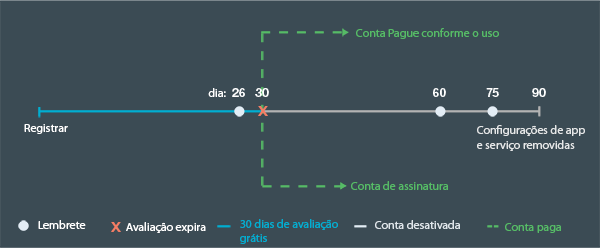
<style>
.page{position:relative;width:600px;height:248px;background:#3b4b54}
.page>*{position:absolute;margin:0}
.t1{font:11.9px "MyriadPro-Regular";color:#56bb66}
.t2{font:11.9px "MyriadPro-Regular";color:#ffffff}
.t3{font:11.9px "HelvNeueBoldforIBM";color:#ffffff}
.t4{font:12.7px "HelvNeueBoldforIBM";color:#f47d64;scale:1.17 1}
.t5{font:11.9px "MyriadPro-Regular";color:#e5e7e8}
.t6{font:11.9px "MyriadPro-Regular";color:#00aed1}
.t7{font:11.9px "MyriadPro-Regular";color:#dfe6eb}
</style>
<div class="page">
<p class="t1" style="left:356px;top:28px;width:143px;height:11px">Conta Pague conforme o uso</p>
<p class="t2" style="left:208px;top:88px;width:18px;height:9px">dia:</p>
<p class="t3" style="left:232px;top:88px;width:13px;height:9px">26</p>
<p class="t3" style="left:255px;top:88px;width:14px;height:9px">30</p>
<p class="t3" style="left:433px;top:88px;width:13px;height:9px">60</p>
<p class="t3" style="left:486px;top:88px;width:13px;height:9px">75</p>
<p class="t3" style="left:532px;top:88px;width:14px;height:9px">90</p>
<p class="t4" style="left:258px;top:106px;width:10px;height:10px">X</p>
<p class="t2" style="left:24px;top:124px;width:44px;height:10px">Registrar</p>
<p class="t5" style="left:477px;top:125px;width:108px;height:26px">Configurações de app <br>e serviço removidas</p>
<p class="t1" style="left:351px;top:181px;width:97px;height:9px">Conta de assinatura</p>
<p class="t2" style="left:38px;top:220px;width:48px;height:9px">Lembrete</p>
<p class="t4" style="left:111px;top:222px;width:10px;height:10px">X</p>
<p class="t2" style="left:126px;top:222px;width:80px;height:11px">Avaliação expira</p>
<p class="t6" style="left:240px;top:219px;width:98px;height:25px">30 dias de avaliação <br>grátis</p>
<p class="t7" style="left:375px;top:220px;width:85px;height:9px">Conta desativada</p>
<p class="t1" style="left:505px;top:223px;width:56px;height:10px">Conta paga</p>
</div>
